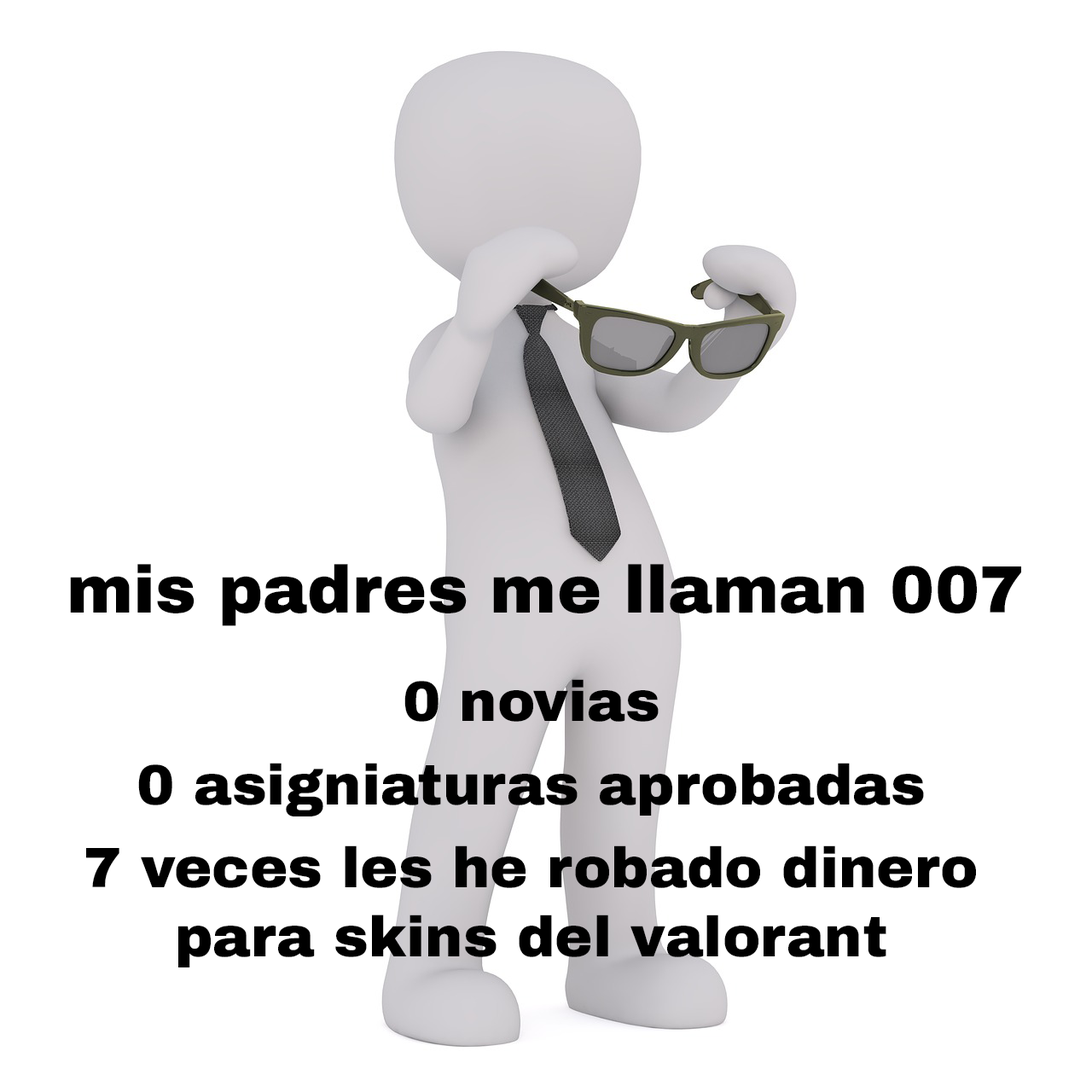
<style>
.page{position:relative;width:1092px;height:1092px;background:#ffffff}
.page>*{position:absolute;margin:0}
.t1{font:66.7px "ArchivoBlack-Regular";color:#000000}
.t2{font:56.9px "ArchivoBlack-Regular";color:#000000}
</style>
<div class="page">
<p class="t1" style="left:70px;top:564px;width:951px;height:62px">mis padres me llaman 007</p>
<p class="t2" style="left:86px;top:679px;width:890px;height:288px;text-align:center">0 novias<br>0 asigniaturas aprobadas<br>7 veces les he robado dinero<br>para skins del valorant</p>
</div>
